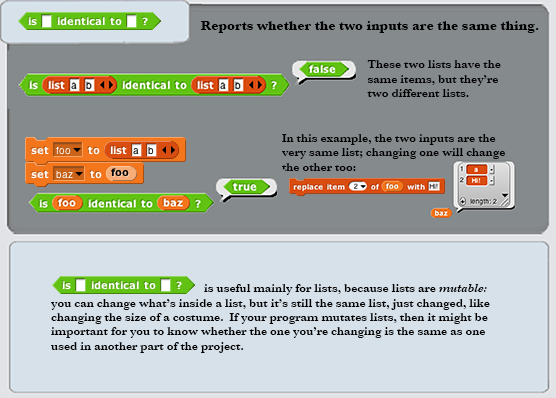
<style>
.page{position:relative;width:556px;height:398px;background:#858a8c}
.page>*{position:absolute;margin:0}
.t1{font:14px "Baskerville-Bold";color:#000000}
.t2{font:12px "Baskerville-SemiBold";color:#000000}
.t3{font:12px "Baskerville-SemiBoldItalic";color:#000000}
</style>
<div class="page">
<p class="t1" style="left:201px;top:21px;width:338px;height:12px">Reports whether the two inputs are the same thing.</p>
<p class="t2" style="left:367px;top:60px;width:134px;height:37px">These two lists have the<br>same items, but they’re<br>two different lists.</p>
<p class="t2" style="left:282px;top:134px;width:223px;height:37px">In this example, the two inputs are the<br>very same list; changing one will change<br>the other too:</p>
<p class="t2" style="left:51px;top:284px;width:439px;height:69px">is useful mainly for lists, because lists are <span class="t3">mutable:<br></span>you can change what’s inside a list, but it’s still the same list, just changed, like<br>changing the size of a costume.  If your program mutates lists, then it might be<br>important for you to know whether the one you’re changing is the same as one<br>used in another part of the project.</p>
</div>
